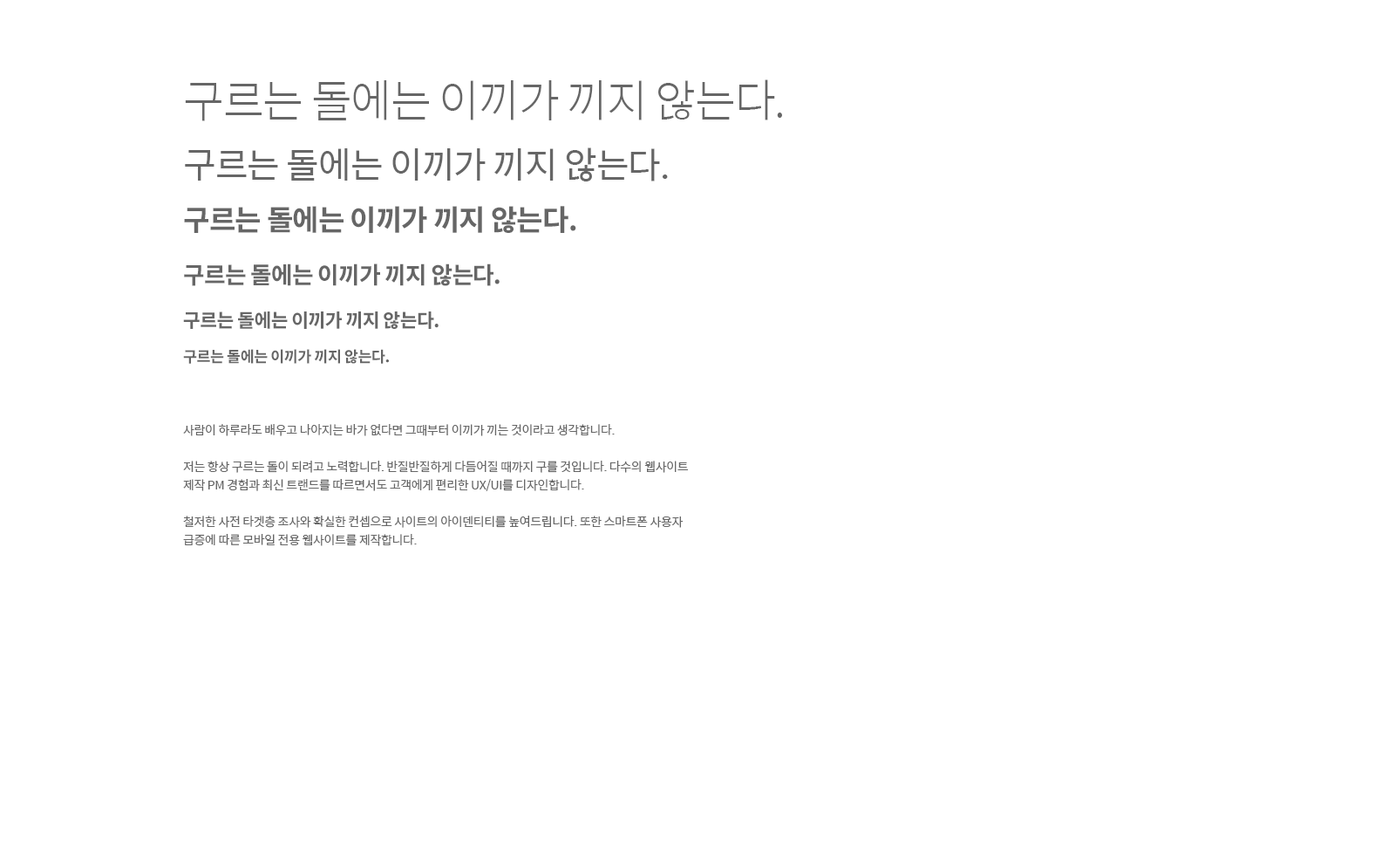
<style>
.page{position:relative;width:1395px;height:855px;background:#ffffff}
.page>*{position:absolute;margin:0}
.t1{font:44.4px "SpoqaHanSans-Light";letter-spacing:-0.025em;color:#666666}
.t2{font:35.8px "SpoqaHanSans-Regular";letter-spacing:-0.025em;color:#666666}
.t3{font:28.9px "SpoqaHanSans-Bold";letter-spacing:-0.025em;color:#666666}
.t4{font:23.3px "SpoqaHanSans-Bold";letter-spacing:-0.025em;color:#666666}
.t5{font:18.8px "SpoqaHanSans-Bold";letter-spacing:-0.025em;color:#666666}
.t6{font:15.1px "SpoqaHanSans-Bold";letter-spacing:-0.025em;color:#666666}
.t7{font:12.2px "SpoqaHanSans-Regular";letter-spacing:-0.025em;color:#666666}
</style>
<div class="page">
<p class="t1" style="left:185px;top:79px;width:597px;height:42px">구르는 돌에는 이끼가 끼지 않는다.</p>
<p class="t2" style="left:185px;top:147px;width:483px;height:34px">구르는 돌에는 이끼가 끼지 않는다.</p>
<p class="t3" style="left:184px;top:206px;width:392px;height:27px">구르는 돌에는 이끼가 끼지 않는다.</p>
<p class="t4" style="left:184px;top:263px;width:316px;height:23px">구르는 돌에는 이끼가 끼지 않는다.</p>
<p class="t5" style="left:183px;top:311px;width:256px;height:18px">구르는 돌에는 이끼가 끼지 않는다.</p>
<p class="t6" style="left:183px;top:349px;width:206px;height:15px">구르는 돌에는 이끼가 끼지 않는다.</p>
<p class="t7" style="left:183px;top:424px;width:505px;height:122px">사람이 하루라도 배우고 나아지는 바가 없다면 그때부터 이끼가 끼는 것이라고 생각합니다. <br>저는 항상 구르는 돌이 되려고 노력합니다. 반질반질하게 다듬어질 때까지 구를 것입니다. 다수의 웹사이트 제작 PM 경험과 최신 트랜드를 따르면서도 고객에게 편리한 UX/UI를 디자인합니다. <br>철저한 사전 타겟층 조사와 확실한 컨셉으로 사이트의 아이덴티티를 높여드립니다. 또한 스마트폰 사용자 급증에 따른 모바일 전용 웹사이트를 제작합니다.</p>
</div>
